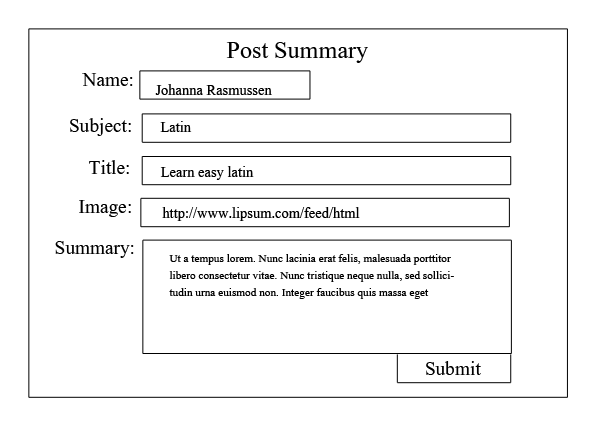
<style>
.page{position:relative;width:595px;height:425px;background:#ffffff}
.page>*{position:absolute;margin:0}
.t1{font:30px "Aparajita";color:#000000}
.t2{font:24px "Aparajita";color:#000000}
.t3{font:18px "Aparajita";color:#000000}
.t4{font:14px "Aparajita";color:#000000}
</style>
<div class="page">
<p class="t1" style="left:226px;top:42px;width:142px;height:21px">Post Summary</p>
<p class="t2" style="left:82px;top:73px;width:51px;height:13px">Name:</p>
<p class="t3" style="left:155px;top:84px;width:117px;height:11px">Johanna Rasmussen</p>
<p class="t2" style="left:70px;top:118px;width:61px;height:18px">Subject:</p>
<p class="t3" style="left:160px;top:121px;width:32px;height:11px">Latin</p>
<p class="t2" style="left:89px;top:160px;width:40px;height:14px">Title:</p>
<p class="t3" style="left:160px;top:166px;width:94px;height:14px">Learn easy latin</p>
<p class="t2" style="left:79px;top:200px;width:52px;height:17px">Image:</p>
<p class="t3" style="left:162px;top:207px;width:198px;height:14px">http://www.lipsum.com/feed/html</p>
<p class="t2" style="left:55px;top:241px;width:79px;height:17px">Summary:</p>
<p class="t4" style="left:169px;top:254px;width:285px;height:45px">Ut a tempus lorem. Nunc lacinia erat felis, malesuada porttitor libero consectetur vitae. Nunc tristique neque nulla, sed sollicitudin urna euismod non. Integer faucibus quis massa eget vulputate.</p>
<p class="t2" style="left:426px;top:361px;width:55px;height:14px">Submit</p>
</div>
